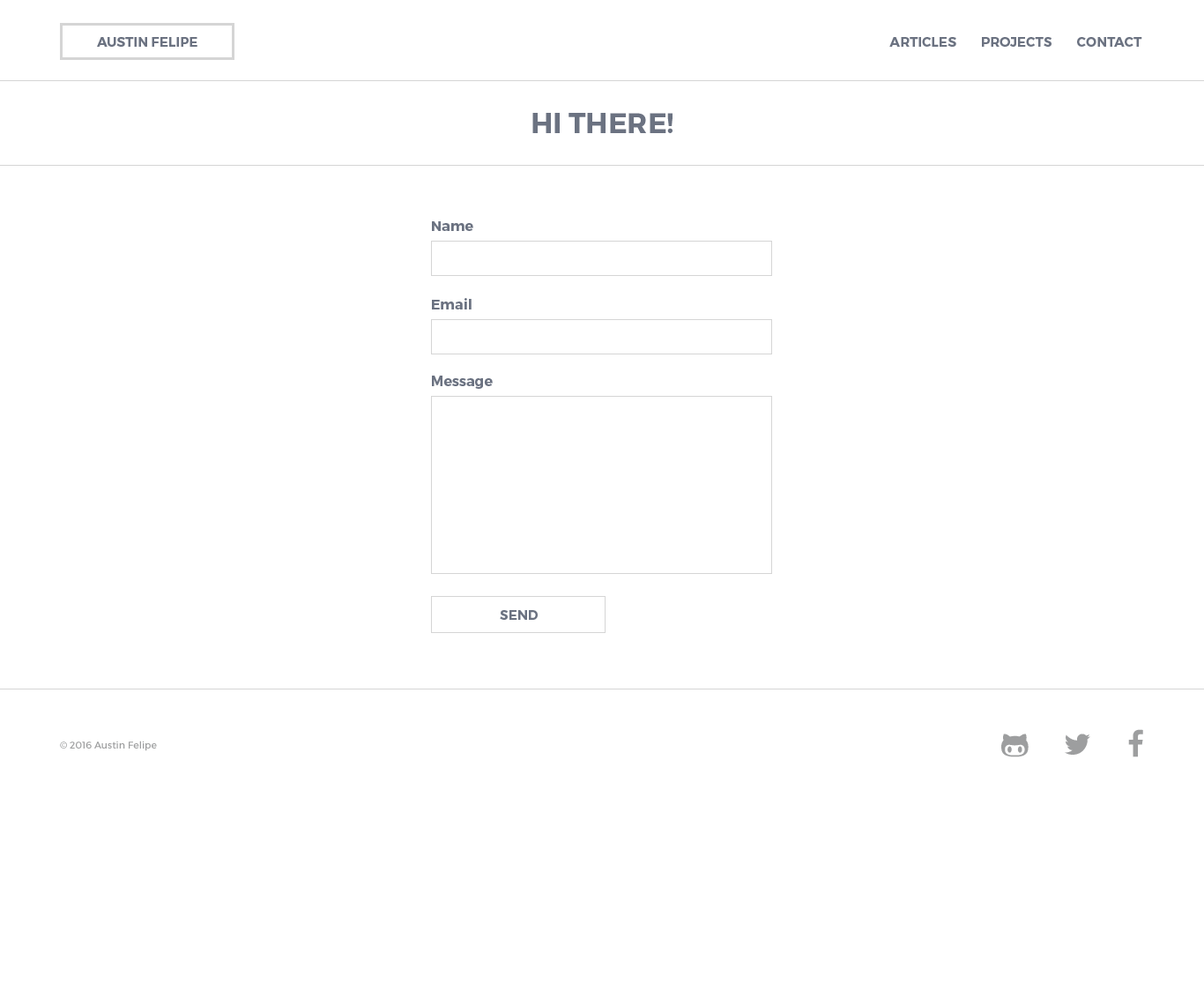
<style>
.page{position:relative;width:1204px;height:991px;background:#ffffff}
.page>*{position:absolute;margin:0}
.t1{font:13.3px "Montserrat-Bold";color:#6b7281;text-transform:uppercase}
.t2{font:28.3px "Montserrat-Bold";color:#6b7281;text-transform:uppercase}
.t3{font:14.1px "Montserrat-Bold";color:#6b7281}
.t4{font:9.7px "Montserrat-Regular";color:#9d9e9f}
</style>
<div class="page">
<p class="t1" style="left:97px;top:37px;width:100px;height:10px">Austin Felipe</p>
<p class="t1" style="left:889px;top:37px;width:253px;height:10px">Articles        projects        Contact</p>
<p class="t2" style="left:532px;top:113px;width:140px;height:20px">Hi there!</p>
<p class="t3" style="left:432px;top:221px;width:41px;height:10px">Name</p>
<p class="t3" style="left:432px;top:298px;width:39px;height:11px">Email</p>
<p class="t3" style="left:432px;top:375px;width:61px;height:14px">Message</p>
<p class="t1" style="left:500px;top:610px;width:38px;height:10px">Send</p>
<p class="t4" style="left:60px;top:740px;width:97px;height:11px">© 2016 Austin Felipe</p>
</div>
